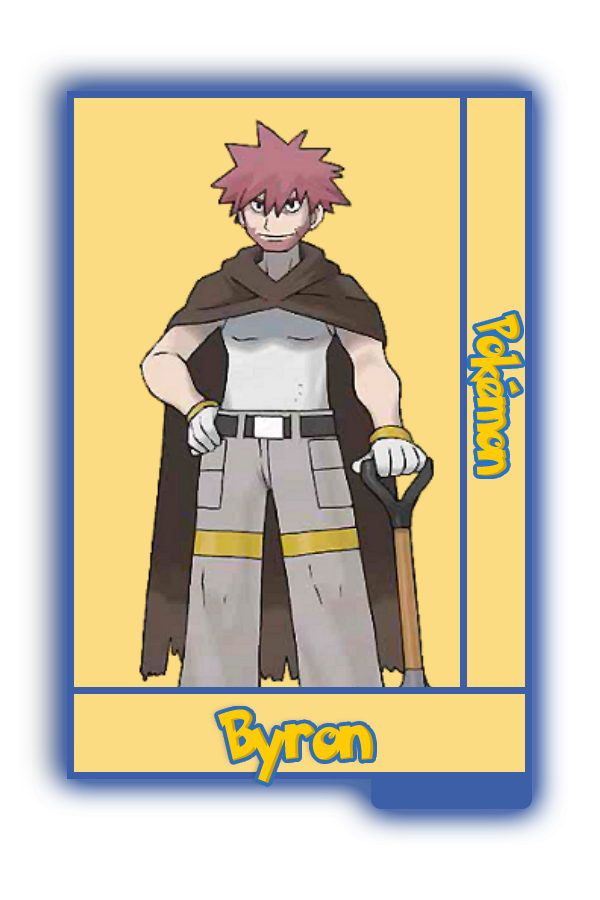
<style>
.page{position:relative;width:600px;height:900px;background:#fbdc83}
.page>*{position:absolute;margin:0}
.t1{font:48.8px "PokemonSolidNormal";color:#ffcb05;scale:0.8 1}
.t2{font:56.6px "PokemonSolidNormal";color:#ffcb05;scale:0.92 1}
</style>
<div class="page">
<p class="t1" style="left:469px;top:313px;width:54px;height:163px;rotate:90deg">Pokémon</p>
<p class="t2" style="left:217px;top:709px;width:157px;height:74px">Byron</p>
</div>
